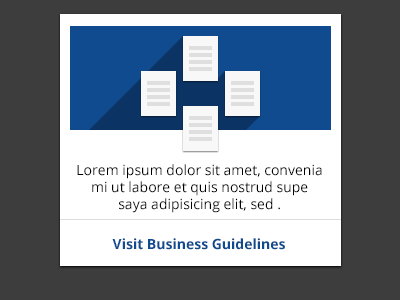
<style>
.page{position:relative;width:400px;height:300px;background:#3d3d3d}
.page>*{position:absolute;margin:0}
.t1{font:14px "OpenSans";color:#000000}
.t2{font:14px/25px "OpenSans";color:#000000}
.t3{font:14px "OpenSans-Bold";color:#104b8f}
</style>
<div class="page">
<p class="t1" style="left:77px;top:164px;width:245px;height:49px;text-align:center"><span class="t2">Lorem ipsum dolor sit amet, con</span>venia mi ut labore et quis nostrud supe<br>saya adipisicing elit, sed .</p>
<p class="t3" style="left:112px;top:238px;width:173px;height:12px">Visit Business Guidelines</p>
</div>
